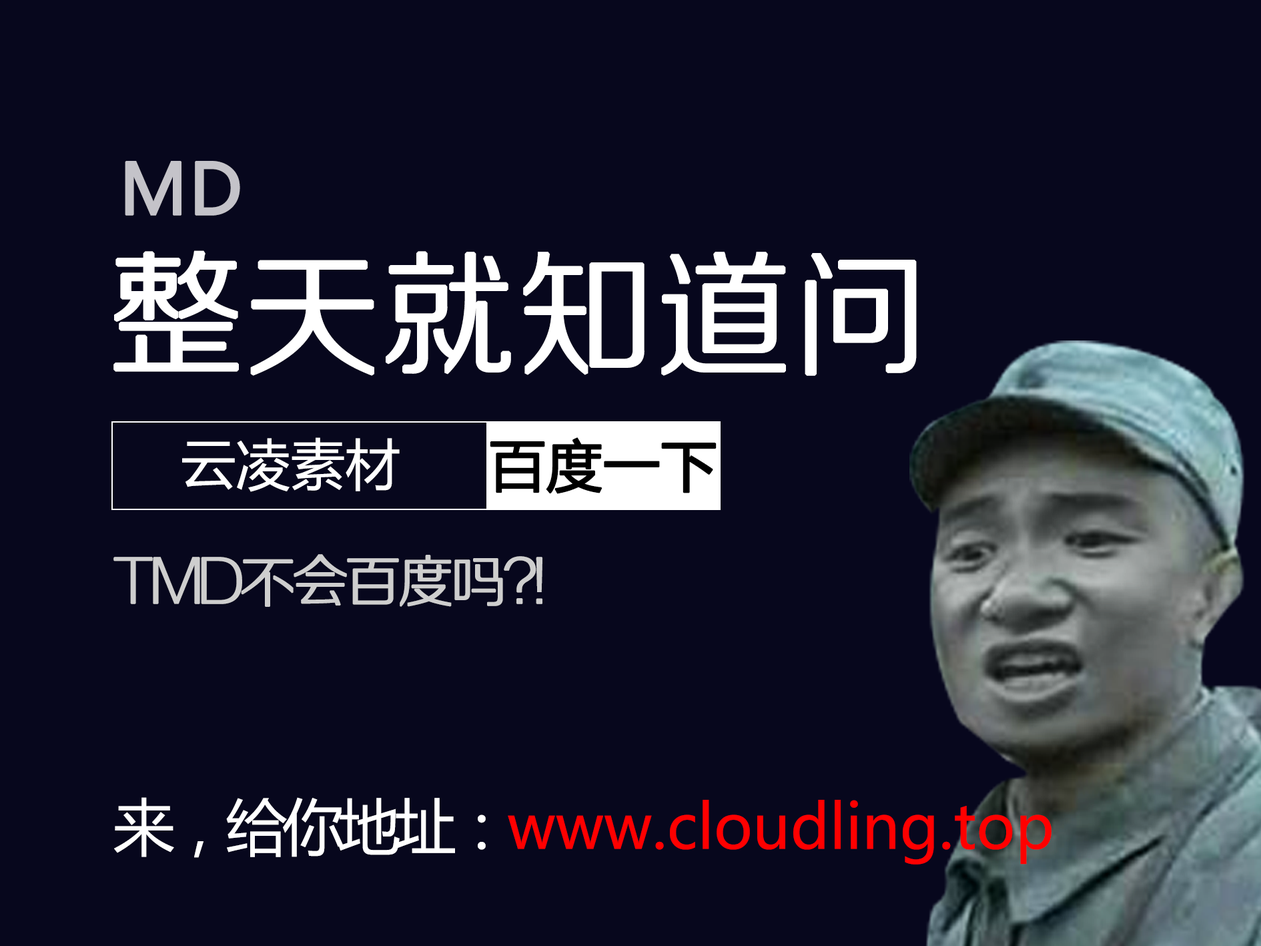
<style>
.page{position:relative;width:1261px;height:946px;background:#07071d}
.page>*{position:absolute;margin:0}
.t1{font:69.5px "MicrosoftYaHei";color:#c4c3c9;font-weight:bold}
.t2{font:133.5px "FZZXHJW--GB1-0";color:#ffffff;font-weight:bold}
.t3{font:55.2px "MicrosoftYaHei";color:#ffffff}
.t4{font:55.6px "MicrosoftYaHei";color:#000000;font-weight:bold}
.t5{font:55.6px "FZZXHJW--GB1-0";letter-spacing:-0.08em;color:#cecece;font-weight:bold}
.t6{font:61.2px "MicrosoftYaHei";color:#ff0000}
.t7{font:61.2px "MicrosoftYaHei";letter-spacing:-0.08em;color:#ffffff}
</style>
<div class="page">
<p class="t1" style="left:125px;top:161px;width:115px;height:55px">MD</p>
<p class="t2" style="left:113px;top:250px;width:804px;height:126px">整天就知道问</p>
<p class="t3" style="left:182px;top:437px;width:218px;height:55px">云凌素材</p>
<p class="t4" style="left:490px;top:437px;width:227px;height:57px">百度一下</p>
<p class="t5" style="left:113px;top:554px;width:429px;height:53px">TMD不会百度吗?!</p>
<p class="t6" style="left:114px;top:797px;width:938px;height:67px"><span class="t7">来，给你地址：</span>www.cloudling.top</p>
</div>
